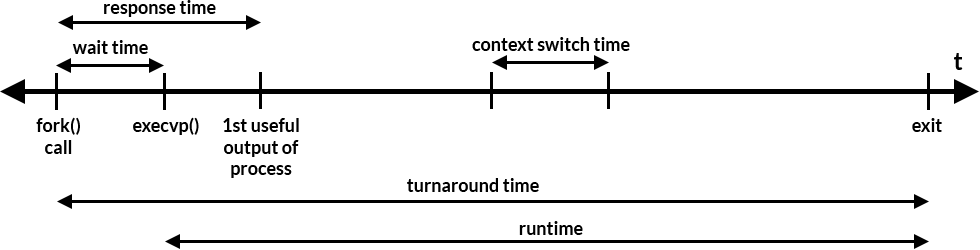
<style>
.page{position:relative;width:980px;height:250px;background:#ffffff}
.page>*{position:absolute;margin:0}
.t1{font:18px "Lato-Bold";color:#000000}
.t2{font:24px "Lato-Bold";color:#000000}
</style>
<div class="page">
<p class="t1" style="left:104px;top:0px;width:112px;height:17px">response time</p>
<p class="t1" style="left:72px;top:40px;width:76px;height:14px">wait time</p>
<p class="t1" style="left:472px;top:37px;width:158px;height:14px">context switch time</p>
<p class="t2" style="left:954px;top:53px;width:9px;height:17px">t</p>
<p class="t1" style="left:36px;top:117px;width:44px;height:37px;text-align:center">fork()<br>call</p>
<p class="t1" style="left:133px;top:117px;width:66px;height:18px">execvp()</p>
<p class="t1" style="left:223px;top:118px;width:76px;height:60px;text-align:center">1st useful<br>output of<br>process</p>
<p class="t1" style="left:912px;top:118px;width:30px;height:14px">exit</p>
<p class="t1" style="left:407px;top:178px;width:132px;height:14px">turnaround time</p>
<p class="t1" style="left:519px;top:221px;width:64px;height:14px">runtime</p>
</div>
